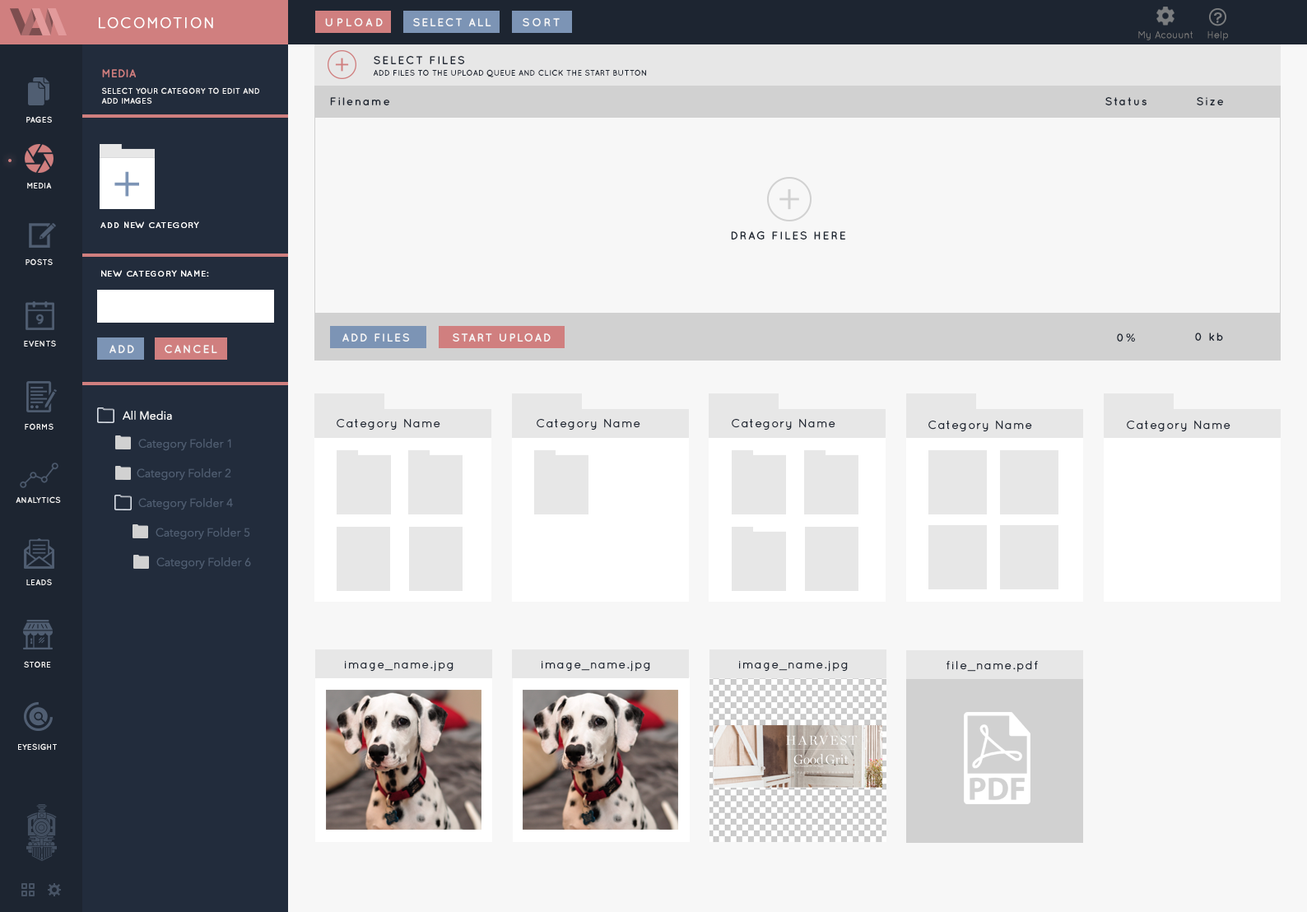
<style>
.page{position:relative;width:1307px;height:912px;background:#f7f7f7}
.page>*{position:absolute;margin:0}
.t1{font:14.8px "Quicksand-Regular";letter-spacing:0.07em;color:#ffffff;font-weight:bold}
.t2{font:11.5px "Quicksand-Bold";letter-spacing:0.2em;color:#f7f7f7;text-transform:uppercase}
.t3{font:11.5px "Quicksand-Bold";letter-spacing:0.1em;color:#f7f7f7;text-transform:uppercase}
.t4{font:11.5px "Quicksand-Bold";letter-spacing:0.175em;color:#f7f7f7;text-transform:uppercase}
.t5{font:9.9px "Quicksand-Regular";color:#797979}
.t6{font:11.5px "Quicksand-Bold";letter-spacing:0.1em;color:#1d2531;text-transform:uppercase}
.t7{font:11.5px "Quicksand-Bold";color:#d07f7f;text-transform:uppercase}
.t8{font:8.2px "Quicksand-Bold";color:#1d2531;text-transform:uppercase}
.t9{font:8.2px/9.9px "Quicksand-Bold";color:#f7f7f7;text-transform:uppercase}
.t10{font:11.5px "Quicksand-Bold";letter-spacing:0.1em;color:#1d2531}
.t11{font:8.2px "Quicksand-Bold";color:#f7f7f7;text-transform:uppercase}
.t12{font:8.2px "Quicksand-Regular";letter-spacing:0.07em;color:#ffffff;font-weight:bold}
.t13{font:11.5px "AvenirNext-Regular";color:#ffffff}
.t14{font:11.5px "Quicksand-Regular";letter-spacing:0.07em;color:#1d2531;font-weight:bold}
.t15{font:11.5px "AvenirNext-Regular";color:#505e72}
</style>
<div class="page">
<p class="t1" style="left:99px;top:17px;width:114px;height:12px">LOCOMOTION</p>
<p class="t2" style="left:325px;top:18px;width:58px;height:8px">UPLOAD</p>
<p class="t3" style="left:413px;top:18px;width:78px;height:8px">SELECT ALL</p>
<p class="t4" style="left:523px;top:18px;width:37px;height:8px">SORT</p>
<p class="t5" style="left:1139px;top:30px;width:54px;height:10px">My Acouunt</p>
<p class="t5" style="left:1208px;top:30px;width:20px;height:10px">Help</p>
<p class="t6" style="left:374px;top:56px;width:91px;height:8px">SELECT FILES</p>
<p class="t7" style="left:102px;top:69px;width:34px;height:8px">MEDIA</p>
<p class="t8" style="left:373px;top:69px;width:273px;height:8px">ADD FILES TO THE UPLOAD QUEUE AND CLICK THE START BUTTON</p>
<p class="t9" style="left:101px;top:87px;width:158px;height:17px">SELECT YOUR CATEGORY TO EDIT AND<br>ADD IMAGES</p>
<p class="t10" style="left:330px;top:97px;width:59px;height:8px">Filename</p>
<p class="t10" style="left:1106px;top:97px;width:41px;height:8px">Status</p>
<p class="t10" style="left:1197px;top:97px;width:26px;height:8px">Size</p>
<p class="t11" style="left:26px;top:116px;width:26px;height:7px">pages</p>
<p class="t11" style="left:27px;top:183px;width:25px;height:6px">MEDIA</p>
<p class="t12" style="left:100px;top:221px;width:99px;height:7px">ADD NEW CATEGORY</p>
<p class="t6" style="left:731px;top:231px;width:114px;height:9px">Drag files here</p>
<p class="t11" style="left:26px;top:258px;width:27px;height:7px">POSTS</p>
<p class="t12" style="left:101px;top:270px;width:108px;height:7px">NEW CATEGORY NAME:</p>
<p class="t11" style="left:24px;top:340px;width:32px;height:7px">EVENTS</p>
<p class="t3" style="left:342px;top:333px;width:68px;height:9px">ADD FILES</p>
<p class="t3" style="left:453px;top:333px;width:98px;height:9px">START UPLOAD</p>
<p class="t10" style="left:1117px;top:333px;width:18px;height:9px">0%</p>
<p class="t10" style="left:1195px;top:333px;width:28px;height:8px">0 kb</p>
<p class="t3" style="left:109px;top:345px;width:25px;height:8px">ADD</p>
<p class="t3" style="left:165px;top:345px;width:52px;height:8px">CANCEL</p>
<p class="t13" style="left:123px;top:411px;width:49px;height:9px">All Media</p>
<p class="t11" style="left:25px;top:423px;width:29px;height:7px">FORMS</p>
<p class="t14" style="left:337px;top:419px;width:103px;height:12px">Category Name</p>
<p class="t14" style="left:537px;top:419px;width:103px;height:12px">Category Name</p>
<p class="t14" style="left:732px;top:419px;width:104px;height:12px">Category Name</p>
<p class="t14" style="left:929px;top:421px;width:103px;height:11px">Category Name</p>
<p class="t14" style="left:1127px;top:421px;width:104px;height:11px">Category Name</p>
<p class="t15" style="left:138px;top:439px;width:93px;height:12px">Category Folder 1</p>
<p class="t15" style="left:137px;top:468px;width:94px;height:13px">Category Folder 2</p>
<p class="t11" style="left:16px;top:496px;width:45px;height:7px">ANALYTICS</p>
<p class="t15" style="left:138px;top:498px;width:95px;height:12px">Category Folder 4</p>
<p class="t15" style="left:156px;top:528px;width:94px;height:12px">Category Folder 5</p>
<p class="t15" style="left:156px;top:557px;width:95px;height:13px">Category Folder 6</p>
<p class="t11" style="left:26px;top:579px;width:26px;height:6px">LEADS</p>
<p class="t11" style="left:24px;top:661px;width:27px;height:7px">STORE</p>
<p class="t14" style="left:345px;top:661px;width:109px;height:11px">image_name.jpg</p>
<p class="t14" style="left:542px;top:661px;width:108px;height:11px">image_name.jpg</p>
<p class="t14" style="left:739px;top:661px;width:109px;height:11px">image_name.jpg</p>
<p class="t14" style="left:947px;top:661px;width:91px;height:12px">file_name.pdf</p>
<p class="t11" style="left:18px;top:743px;width:39px;height:7px">EYESIGHT</p>
</div>
